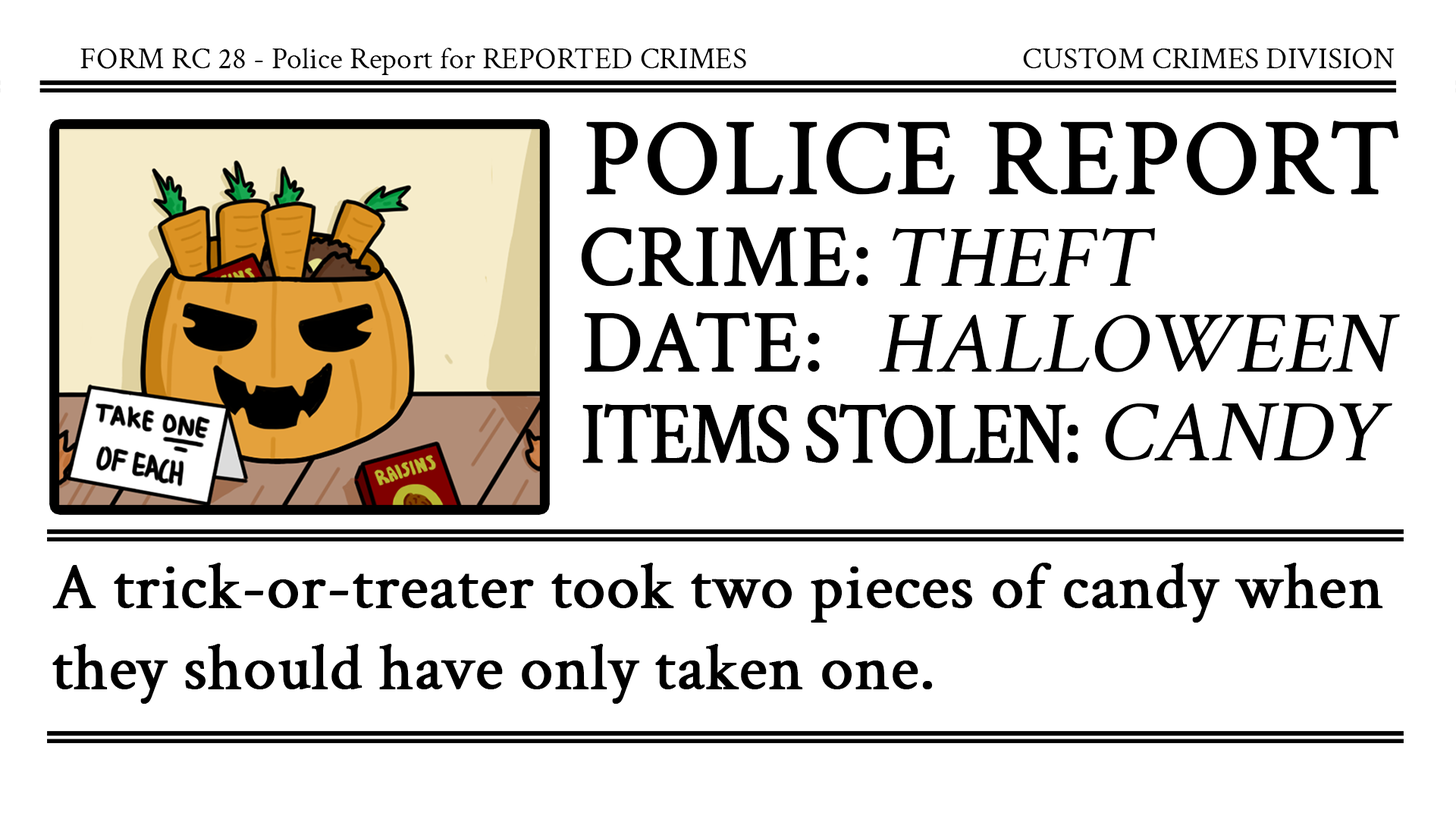
<style>
.page{position:relative;width:1456px;height:819px;background:#ffffff}
.page>*{position:absolute;margin:0}
.t1{font:30.5px "CrimsonText-Regular";color:#000000}
.t2{font:107.9px "CrimsonText-Regular";color:#000000;font-variant:small-caps;font-weight:bold}
.t3{font:86.1px "CrimsonText-Regular";color:#000000;font-variant:small-caps;font-weight:bold}
.t4{font:86.1px "CrimsonText-Regular";color:#000000;font-variant:small-caps;font-style:italic}
.t5{font:86.3px "CrimsonText-Regular";letter-spacing:-0.05em;color:#000000;font-variant:small-caps;font-weight:bold;scale:0.87 1}
.t6{font:65.1px/81.3px "CrimsonText-Regular";color:#000000;font-weight:bold}
</style>
<div class="page">
<p class="t1" style="left:80px;top:48px;width:666px;height:27px">FORM RC 28 - Police Report for REPORTED CRIMES</p>
<p class="t1" style="left:1023px;top:48px;width:372px;height:21px">CUSTOM CRIMES DIVISION</p>
<p class="t2" style="left:586px;top:121px;width:813px;height:75px">POLICE REPORT</p>
<p class="t3" style="left:581px;top:227px;width:287px;height:60px">CRIME:</p>
<p class="t4" style="left:892px;top:227px;width:263px;height:59px">THEFT</p>
<p class="t3" style="left:584px;top:312px;width:236px;height:60px">DATE:</p>
<p class="t4" style="left:879px;top:314px;width:521px;height:58px">HALLOWEEN</p>
<p class="t5" style="left:582px;top:403px;width:496px;height:60px">ITEMS STOLEN:</p>
<p class="t4" style="left:1105px;top:403px;width:287px;height:58px">CANDY</p>
<p class="t6" style="left:52px;top:563px;width:1331px;height:141px">A trick-or-treater took two pieces of candy when<br>they should have only taken one.</p>
</div>
